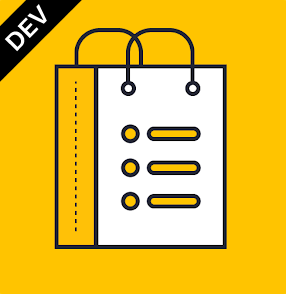
<style>
.page{position:relative;width:286px;height:294px;background:#ffc400}
.page>*{position:absolute;margin:0}
.t1{font:25px "Aileron-Bold";color:#ffffff}
</style>
<div class="page">
<p class="t1" style="left:4px;top:4px;width:43px;height:48px;rotate:-46deg">DEV</p>
</div>
